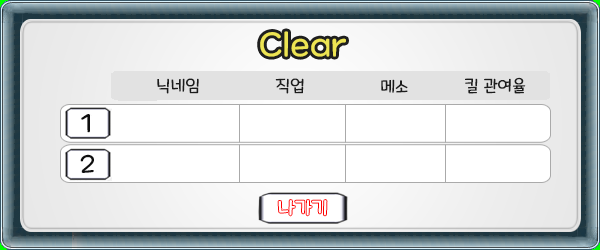
<style>
.page{position:relative;width:600px;height:250px;background:#ffffff}
.page>*{position:absolute;margin:0}
.t1{font:33.3px "MaplestoryLight";color:#ede453}
.t2{font:16.7px "MaplestoryLight";color:#1c1c1c}
.t3{font:12px "MaplestoryLight";color:#1c1c1c}
.t4{font:25px "MaplestoryLight";color:#0e0e0e}
</style>
<div class="page">
<p class="t1" style="left:260px;top:31px;width:86px;height:26px">Clear</p>
<p class="t2" style="left:157px;top:78px;width:42px;height:16px">닉네임</p>
<p class="t3" style="left:275px;top:78px;width:29px;height:16px">직업</p>
<p class="t3" style="left:465px;top:77px;width:61px;height:17px">킬 관여율</p>
<p class="t2" style="left:381px;top:79px;width:27px;height:14px">메소</p>
<p class="t4" style="left:81px;top:114px;width:9px;height:19px">1</p>
<p class="t4" style="left:80px;top:154px;width:14px;height:19px">2</p>
</div>
